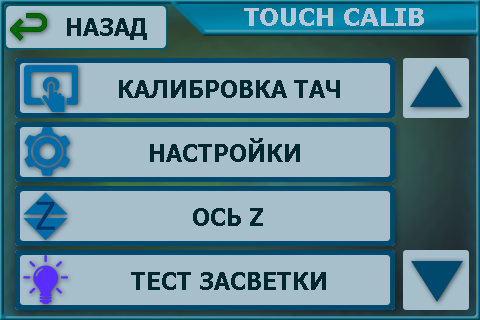
<style>
.page{position:relative;width:480px;height:320px;background:#a6bfcb}
.page>*{position:absolute;margin:0}
.t1{font:24px "Verdana-Bold";color:#bac5d5}
.t2{font:24px "Tahoma-Bold";color:#00272e}
</style>
<div class="page">
<p class="t1" style="left:244px;top:8px;width:180px;height:18px">TOUCH CALIB</p>
<p class="t2" style="left:67px;top:18px;width:80px;height:22px">НАЗАД</p>
<p class="t2" style="left:119px;top:80px;width:221px;height:18px">КАЛИБРОВКА ТАЧ</p>
<p class="t2" style="left:150px;top:138px;width:150px;height:24px">НАСТРОЙКИ</p>
<p class="t2" style="left:193px;top:208px;width:70px;height:18px">ОСЬ Z</p>
<p class="t2" style="left:131px;top:272px;width:195px;height:18px">ТЕСТ ЗАСВЕТКИ</p>
</div>
